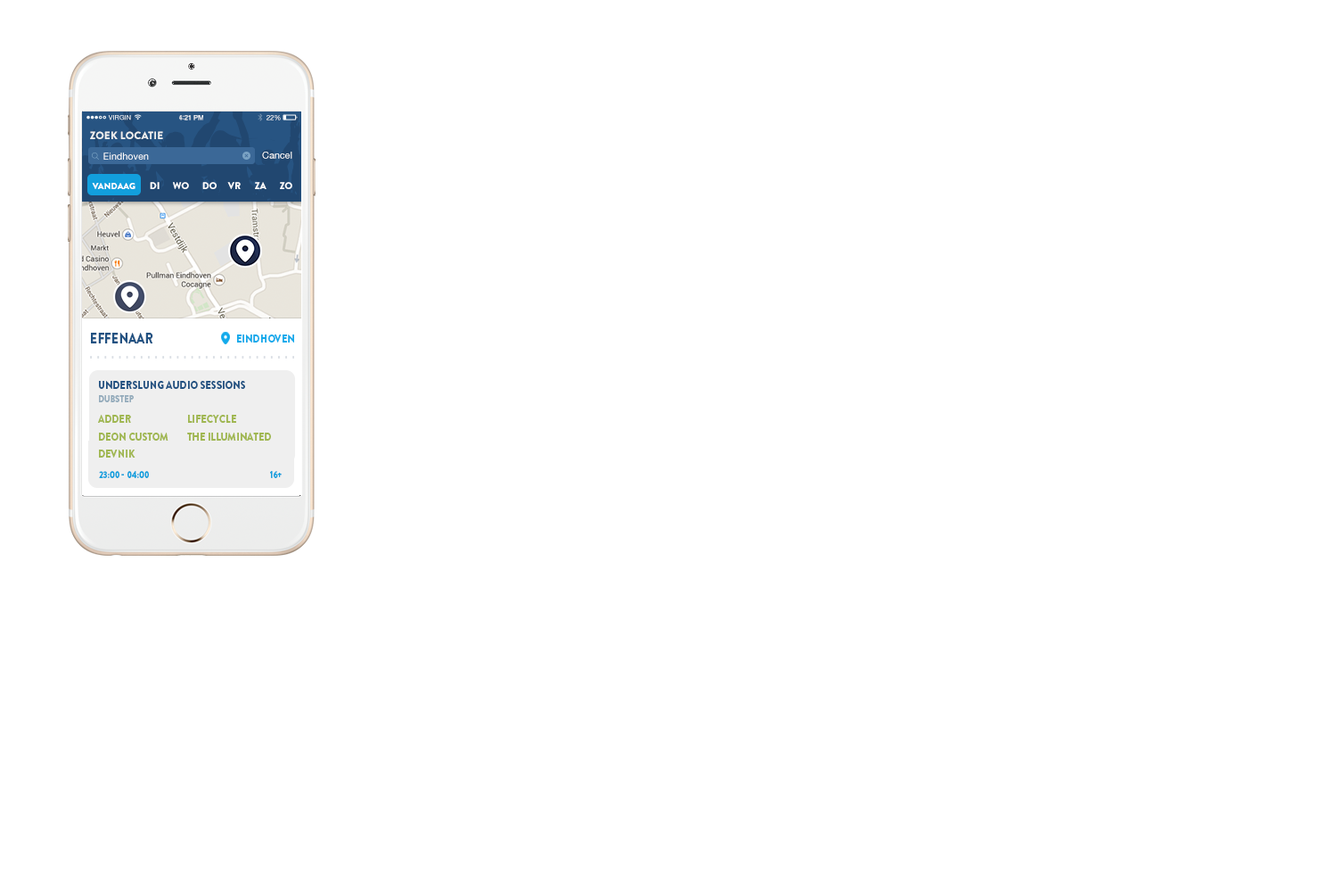
<style>
.page{position:relative;width:1337px;height:892px;background:#ffffff}
.page>*{position:absolute;margin:0}
.t1{font:6.6px "HelveticaNeue";letter-spacing:0.02em;color:#ffffff}
.t2{font:6.9px "HelveticaNeue-Medium";letter-spacing:-0.02em;color:#ffffff}
.t3{font:7.4px "Avenir-Medium";letter-spacing:-0.02em;color:#ffffff}
.t4{font:6.9px "HelveticaNeue";letter-spacing:-0.02em}
.t5{font:10.7px "BrandonGrotesque-Black";color:#eeefef}
.t6{font:9.6px "HelveticaNeue";color:#ffffff}
.t7{font:8.9px "BrandonGrotesque-Black";color:#ffffff}
.t8{font:9.6px "BrandonGrotesque-Black";color:#ffffff}
.t9{font:14.7px "BrandonGrotesque-Black";color:#225282;text-transform:uppercase;scale:0.85 1}
.t10{font:11.6px "BrandonGrotesque-Black";color:#12aaeb;text-transform:uppercase;scale:0.85 1}
.t11{font:11.6px "BrandonGrotesque-Black";color:#225282;text-transform:uppercase;scale:0.85 1}
.t12{font:9.8px "BrandonGrotesque-Black";color:#95acbc;text-transform:uppercase;scale:0.85 1}
.t13{font:11.6px "BrandonGrotesque-Black";color:#a0b751;text-transform:uppercase;scale:0.85 1}
.t14{font:9.8px "BrandonGrotesque-Black";color:#129fdd;text-transform:uppercase;scale:0.85 1}
</style>
<div class="page">
<p class="t1" style="left:108px;top:115px;width:23px;height:5px">VIRGIN</p>
<p class="t2" style="left:179px;top:115px;width:24px;height:5px">4<span class="t3">:</span>21 PM</p>
<p class="t4" style="left:267px;top:115px;width:14px;height:5px">22%</p>
<p class="t5" style="left:90px;top:131px;width:73px;height:8px">ZOEK LOCATIE</p>
<p class="t6" style="left:103px;top:152px;width:46px;height:8px">Eindhoven</p>
<p class="t6" style="left:262px;top:152px;width:30px;height:7px">Cancel</p>
<p class="t7" style="left:92px;top:183px;width:44px;height:6px">VANDAAG</p>
<p class="t8" style="left:150px;top:182px;width:10px;height:7px">DI</p>
<p class="t8" style="left:173px;top:182px;width:16px;height:7px">WO</p>
<p class="t8" style="left:202px;top:182px;width:15px;height:7px">DO</p>
<p class="t8" style="left:227px;top:182px;width:14px;height:7px">VR</p>
<p class="t8" style="left:255px;top:182px;width:12px;height:7px">ZA</p>
<p class="t8" style="left:280px;top:182px;width:12px;height:7px">ZO</p>
<p class="t9" style="left:91px;top:333px;width:62px;height:10px">EFFENAAR</p>
<p class="t10" style="left:237px;top:334px;width:57px;height:8px">EINDHOVEN</p>
<p class="t11" style="left:99px;top:381px;width:146px;height:8px">Underslung Audio Sessions</p>
<p class="t12" style="left:99px;top:395px;width:35px;height:7px">Dubstep</p>
<p class="t13" style="left:98px;top:415px;width:33px;height:8px">Adder</p>
<p class="t13" style="left:188px;top:415px;width:48px;height:8px">Lifecycle</p>
<p class="t13" style="left:99px;top:432px;width:70px;height:8px">Deon Custom</p>
<p class="t13" style="left:187px;top:432px;width:84px;height:8px">The Illuminated</p>
<p class="t13" style="left:99px;top:449px;width:37px;height:8px">Devnik</p>
<p class="t14" style="left:99px;top:471px;width:50px;height:7px">23:00 - 04:00</p>
<p class="t14" style="left:270px;top:471px;width:12px;height:7px">16+</p>
</div>
